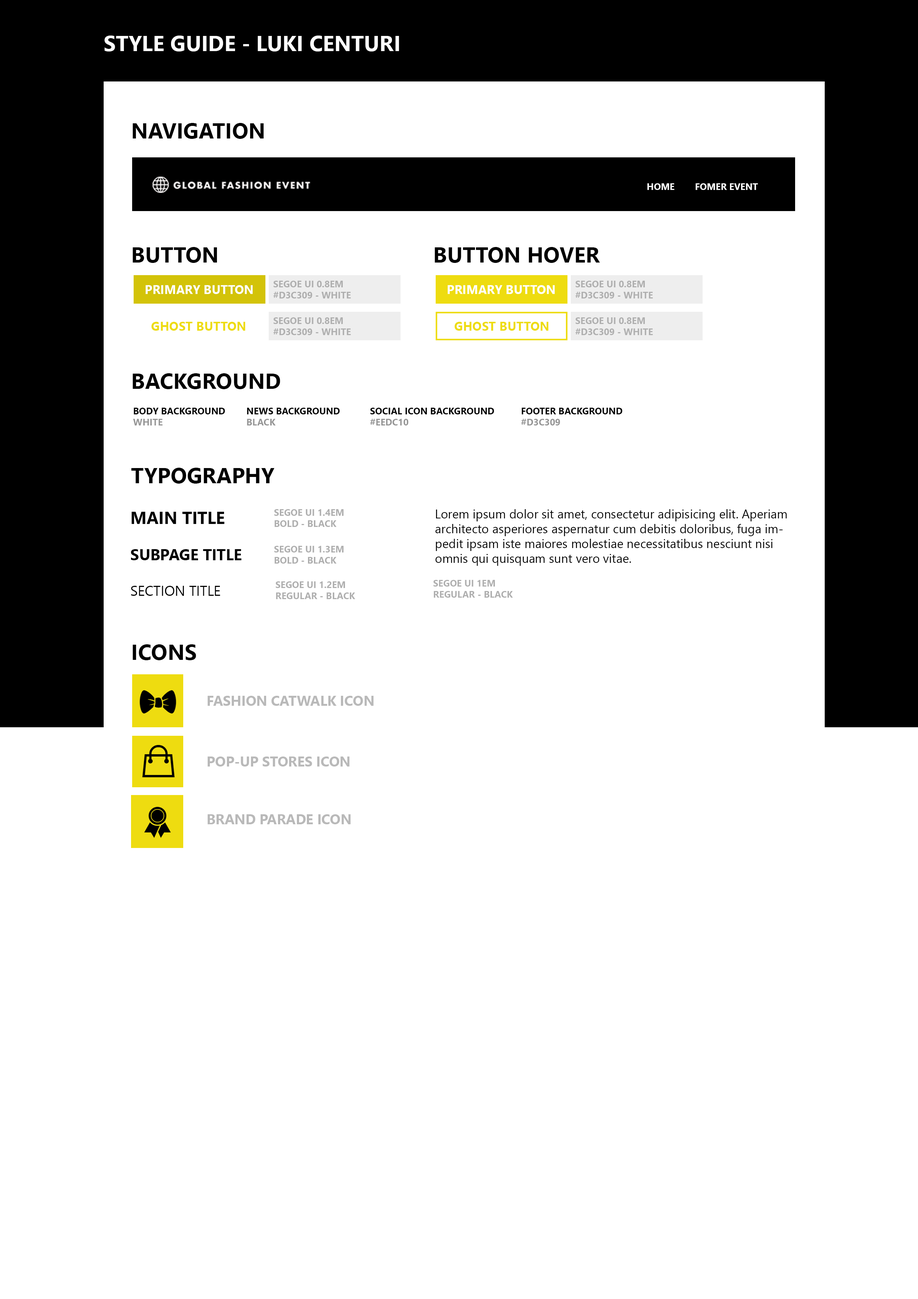
<style>
.page{position:relative;width:918px;height:1299px;background:#ffffff}
.page>*{position:absolute;margin:0}
.t1{font:21.6px "SegoeUI-Bold";color:#ffffff}
.t2{font:21.6px "SegoeUI-Bold";color:#010101}
.t3{font:9.3px "SegoeUI-Bold";color:#ffffff}
.t4{font:9.3px "SegoeUI-Bold";color:#afafaf}
.t5{font:12.3px "SegoeUI-Bold";color:#ffffff}
.t6{font:12.3px "SegoeUI-Bold";color:#eedc10}
.t7{font:9.3px "SegoeUI-Bold";color:#000000}
.t8{font:9.3px "SegoeUI-Bold";color:#969696}
.t9{font:12.3px "SegoeUI";color:#000000}
.t10{font:17px "SegoeUI-Bold";color:#010101}
.t11{font:15.4px "SegoeUI-Bold";color:#010101}
.t12{font:13.9px "SegoeUI";color:#010101}
.t13{font:13.9px "SegoeUI-Bold";color:#b9b9b9}
</style>
<div class="page">
<p class="t1" style="left:104px;top:36px;width:295px;height:15px">STYLE GUIDE - LUKI CENTURI</p>
<p class="t2" style="left:133px;top:123px;width:131px;height:16px">NAVIGATION</p>
<p class="t3" style="left:648px;top:183px;width:110px;height:7px">HOME        FOMER EVENT</p>
<p class="t2" style="left:133px;top:247px;width:84px;height:16px">BUTTON</p>
<p class="t2" style="left:435px;top:247px;width:165px;height:16px">BUTTON HOVER</p>
<p class="t4" style="left:273px;top:281px;width:78px;height:17px">SEGOE UI 0.8EM<br>#D3C309 - WHITE</p>
<p class="t4" style="left:575px;top:281px;width:78px;height:17px">SEGOE UI 0.8EM<br>#D3C309 - WHITE</p>
<p class="t5" style="left:145px;top:285px;width:108px;height:9px">PRIMARY BUTTON</p>
<p class="t5" style="left:448px;top:285px;width:107px;height:9px">PRIMARY BUTTON</p>
<p class="t4" style="left:273px;top:317px;width:78px;height:18px">SEGOE UI 0.8EM<br>#D3C309 - WHITE</p>
<p class="t4" style="left:575px;top:317px;width:78px;height:18px">SEGOE UI 0.8EM<br>#D3C309 - WHITE</p>
<p class="t6" style="left:151px;top:322px;width:94px;height:9px">GHOST BUTTON</p>
<p class="t6" style="left:455px;top:322px;width:94px;height:9px">GHOST BUTTON</p>
<p class="t2" style="left:133px;top:373px;width:147px;height:16px">BACKGROUND</p>
<p class="t7" style="left:133px;top:408px;width:92px;height:17px">BODY BACKGROUND<br><span class="t8">WHITE</span></p>
<p class="t7" style="left:247px;top:408px;width:93px;height:17px">NEWS BACKGROUND<br><span class="t8">BLACK</span></p>
<p class="t7" style="left:370px;top:408px;width:124px;height:17px">SOCIAL ICON BACKGROUND<br><span class="t8">#EEDC10</span></p>
<p class="t7" style="left:521px;top:408px;width:101px;height:17px">FOOTER BACKGROUND<br><span class="t8">#D3C309</span></p>
<p class="t2" style="left:131px;top:468px;width:144px;height:16px">TYPOGRAPHY</p>
<p class="t4" style="left:274px;top:509px;width:70px;height:18px">SEGOE UI 1.4EM<br>BOLD - BLACK</p>
<p class="t9" style="left:435px;top:509px;width:352px;height:57px">Lorem ipsum dolor sit amet, consectetur adipisicing elit. Aperiam architecto asperiores aspernatur cum debitis doloribus, fuga impedit ipsam iste maiores molestiae necessitatibus nesciunt nisi omnis qui quisquam sunt vero vitae.</p>
<p class="t10" style="left:131px;top:512px;width:93px;height:12px">MAIN TITLE</p>
<p class="t4" style="left:274px;top:546px;width:70px;height:17px">SEGOE UI 1.3EM<br>BOLD - BLACK</p>
<p class="t11" style="left:131px;top:549px;width:110px;height:11px">SUBPAGE TITLE</p>
<p class="t4" style="left:276px;top:581px;width:79px;height:18px">SEGOE UI 1.2EM<br>REGULAR - BLACK</p>
<p class="t4" style="left:434px;top:580px;width:79px;height:18px">SEGOE UI 1EM<br>REGULAR - BLACK</p>
<p class="t12" style="left:131px;top:586px;width:89px;height:10px">SECTION TITLE</p>
<p class="t2" style="left:133px;top:644px;width:63px;height:16px">ICONS</p>
<p class="t13" style="left:208px;top:696px;width:166px;height:10px">FASHION CATWALK ICON</p>
<p class="t13" style="left:208px;top:756px;width:141px;height:10px">POP-UP STORES ICON</p>
<p class="t13" style="left:208px;top:814px;width:143px;height:10px">BRAND PARADE ICON</p>
</div>
